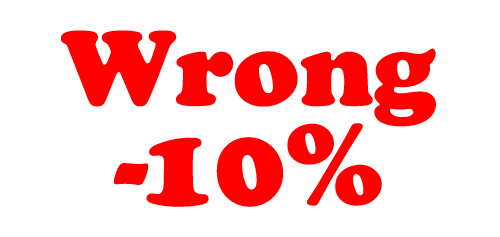
<style>
.page{position:relative;width:500px;height:237px;background:#ffffff}
.page>*{position:absolute;margin:0}
.t1{font:110px/100px "CooperBlack";color:#ff0000}
.t2{font:120.2px/100px "CooperBlack";color:#ff0000}
</style>
<div class="page">
<p class="t1" style="left:61px;top:30px;width:375px;height:177px;text-align:center">Wrong<br><span class="t2">- 10%</span></p>
</div>
